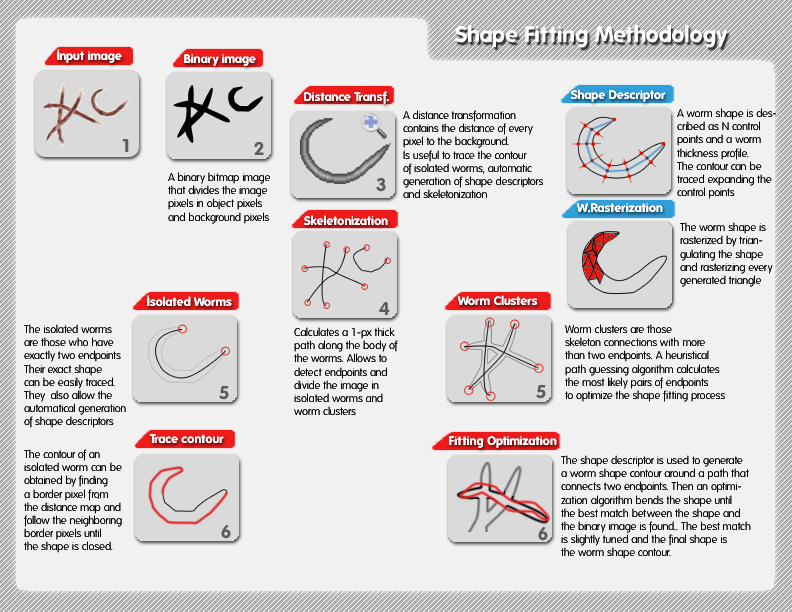
<style>
.page{position:relative;width:792px;height:612px;background:#f1f1f1}
.page>*{position:absolute;margin:0}
.t1{font:22px "Folks-Bold";color:#ffffff}
.t2{font:12px "Folks-Bold";color:#ffffff}
.t3{font:11px "Folks-Light";color:#000000}
.t4{font:10px "Folks-Normal";color:#000000}
</style>
<div class="page">
<p class="t1" style="left:455px;top:24px;width:272px;height:24px">Shape Fitting Methodology</p>
<p class="t2" style="left:184px;top:54px;width:72px;height:12px">Binary image</p>
<p class="t2" style="left:571px;top:89px;width:95px;height:13px">Shape Descriptor</p>
<p class="t2" style="left:304px;top:91px;width:85px;height:13px">Distance Transf.</p>
<p class="t3" style="left:403px;top:110px;width:140px;height:88px">A distance transformation<br>contains the distance of every <br>pixel to the background.<br>Is useful to trace the contour <br>of isolated worms, automatic<br>generation of shape descriptors <br>and skeletonization</p>
<p class="t3" style="left:677px;top:108px;width:99px;height:91px">A worm shape is des-<br>cribed as N control<br>points and a worm<br>thickness profile. <br>The contour can be <br>traced expanding the <br>control points</p>
<p class="t3" style="left:168px;top:172px;width:102px;height:52px">A binary bitmap image <br>that divides the image <br>pixels in object pixels<br>and background pixels</p>
<p class="t2" style="left:576px;top:203px;width:87px;height:10px">W.Rasterization</p>
<p class="t2" style="left:304px;top:215px;width:84px;height:11px">Skeletonization</p>
<p class="t3" style="left:680px;top:222px;width:93px;height:65px"><span class="t4"><br></span>The worm shape is<br>rasterized by trian-<br>gulating the shape<br>and rasterizing every<br>generated triangle</p>
<p class="t2" style="left:147px;top:295px;width:85px;height:12px">Isolated Worms</p>
<p class="t2" style="left:457px;top:295px;width:81px;height:11px">Worm Clusters</p>
<p class="t3" style="left:24px;top:324px;width:102px;height:104px">The isolated worms<br>are those who have<br>exactly two endpoints<br>Their exact shape <br>can be easily traced. <br>They  also allow the <br>automatical generation <br>of shape descriptors</p>
<p class="t3" style="left:294px;top:327px;width:104px;height:88px">Calculates a 1-px thick<br>path along the body of<br>the worms. Allows to <br>detect endpoints and <br>divide the image in<br>isolated worms and <br>worm clusters</p>
<p class="t3" style="left:565px;top:324px;width:160px;height:78px">Worm clusters are those <br>skeleton connections with more<br>than two endpoints. A heuristical<br>path guessing algorithm calculates<br>the most likely pairs of endpoints<br>to optimize the shape fitting process</p>
<p class="t2" style="left:150px;top:434px;width:74px;height:10px">Trace contour</p>
<p class="t2" style="left:449px;top:436px;width:108px;height:12px">Fitting Optimization</p>
<p class="t3" style="left:24px;top:449px;width:98px;height:104px">The contour of an <br>isolated worm can be <br>obtained by finding<br>a border pixel from <br>the distance map and <br>follow the neighboring<br>border pixels until <br>the shape is closed.</p>
<p class="t3" style="left:561px;top:455px;width:190px;height:104px">The shape descriptor is used to generate<br>a worm shape contour around a path that<br>connects two endpoints. Then an optimi-<br>zation algorithm bends the shape until<br>the best match between the shape and<br>the binary image is found.. The best match<br>is slightly tuned and the final shape is<br>the worm shape contour.</p>
</div>
